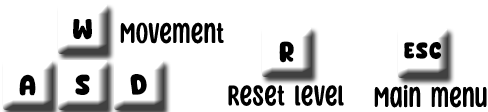
<style>
.page{position:relative;width:488px;height:112px;background:#ffffff}
.page>*{position:absolute;margin:0}
.t1{font:27px "Cute-Dino";letter-spacing:0.035em;color:#000000;scale:0.93 1}
.t2{font:32.4px "SunnySpellsBasic-Regular";letter-spacing:0.035em;color:#000000;scale:0.93 1}
.t3{font:21.6px "Cute-Dino";letter-spacing:0.035em;color:#000000;scale:0.93 1}
</style>
<div class="page">
<p class="t1" style="left:73px;top:19px;width:19px;height:21px">W</p>
<p class="t2" style="left:120px;top:22px;width:104px;height:22px">Movement</p>
<p class="t1" style="left:279px;top:41px;width:15px;height:22px">R</p>
<p class="t3" style="left:404px;top:42px;width:37px;height:17px">ESC</p>
<p class="t1" style="left:19px;top:74px;width:17px;height:22px">A</p>
<p class="t1" style="left:75px;top:74px;width:15px;height:21px">S</p>
<p class="t1" style="left:130px;top:74px;width:17px;height:21px">D</p>
<p class="t2" style="left:228px;top:85px;width:116px;height:21px">Reset level</p>
<p class="t2" style="left:374px;top:85px;width:113px;height:23px">Main menu</p>
</div>
